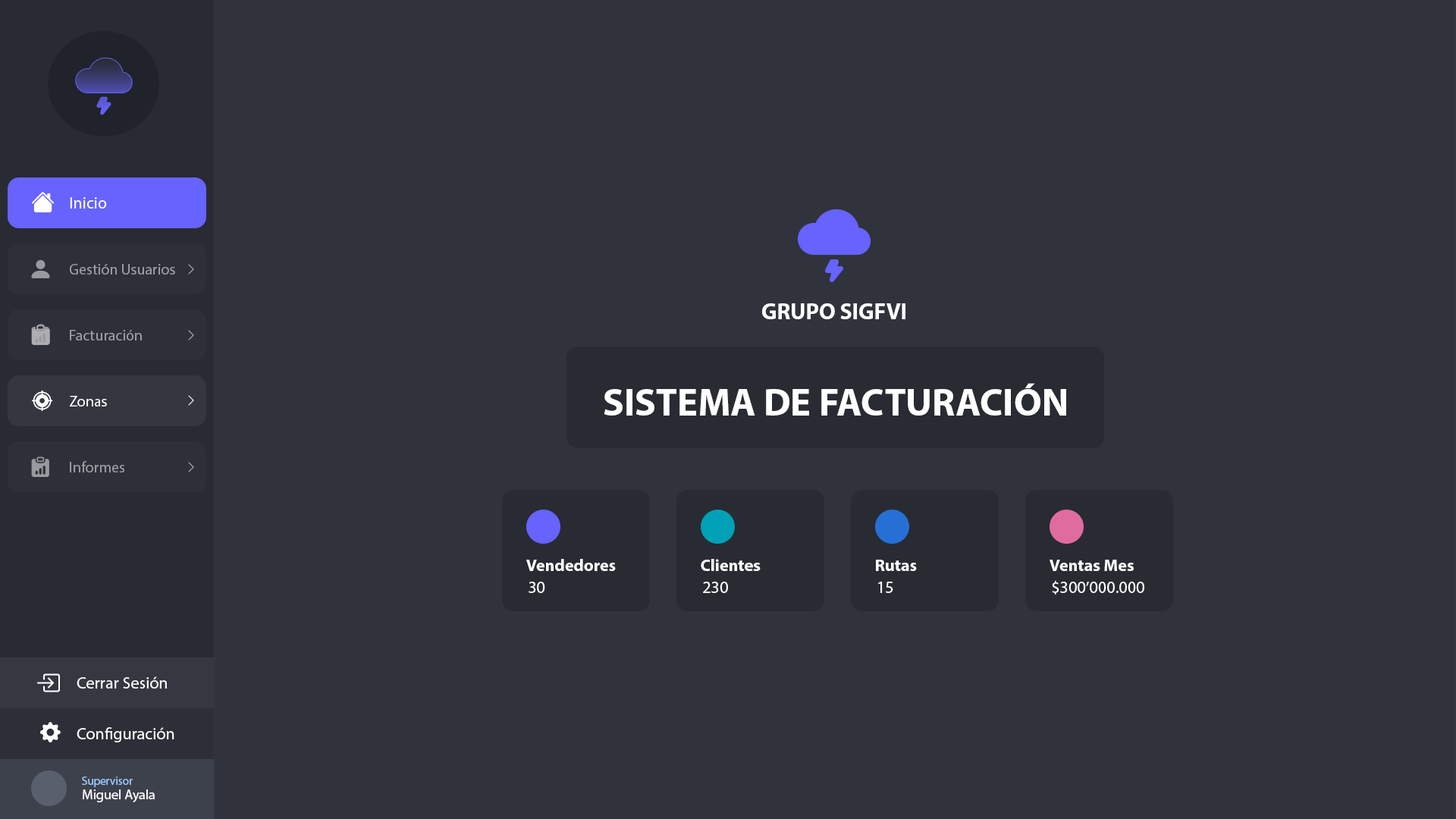
<style>
.page{position:relative;width:1456px;height:819px;background:#30333c}
.page>*{position:absolute;margin:0}
.t1{font:16.7px "MyriadPro-Regular";color:#ffffff}
.t2{font:15.2px "MyriadPro-Regular";color:#9e9fa3}
.t3{font:22.7px "MyriadPro-Bold";color:#ffffff}
.t4{font:38.7px "MyriadPro-Bold";color:#ffffff}
.t5{font:15.2px "MyriadPro-Regular";color:#ffffff}
.t6{font:16.9px "MyriadPro-Bold";color:#ffffff}
.t7{font:16.9px "MyriadPro-Regular";color:#ffffff}
.t8{font:11.4px "MyriadPro-Regular";color:#9dcdff}
.t9{font:13.6px "MyriadPro-Regular";color:#ffffff}
</style>
<div class="page">
<p class="t1" style="left:70px;top:197px;width:37px;height:12px">Inicio</p>
<p class="t2" style="left:70px;top:264px;width:105px;height:11px">Gestión Usuarios</p>
<p class="t3" style="left:762px;top:303px;width:143px;height:16px">GRUPO SIGFVI</p>
<p class="t2" style="left:70px;top:330px;width:72px;height:10px">Facturación</p>
<p class="t4" style="left:604px;top:383px;width:462px;height:33px">SISTEMA DE FACTURACIÓN</p>
<p class="t5" style="left:70px;top:396px;width:37px;height:10px">Zonas</p>
<p class="t2" style="left:70px;top:461px;width:54px;height:11px">Informes</p>
<p class="t6" style="left:526px;top:559px;width:90px;height:12px">Vendedores</p>
<p class="t6" style="left:701px;top:559px;width:60px;height:12px">Clientes</p>
<p class="t6" style="left:876px;top:560px;width:41px;height:11px">Rutas</p>
<p class="t6" style="left:1050px;top:560px;width:84px;height:11px">Ventas Mes</p>
<p class="t7" style="left:529px;top:582px;width:16px;height:11px">30</p>
<p class="t7" style="left:703px;top:582px;width:25px;height:11px">230</p>
<p class="t7" style="left:878px;top:582px;width:15px;height:11px">15</p>
<p class="t7" style="left:1052px;top:580px;width:92px;height:15px">$300’000.000</p>
<p class="t1" style="left:77px;top:676px;width:90px;height:13px">Cerrar Sesión</p>
<p class="t1" style="left:77px;top:727px;width:97px;height:15px">Configuración</p>
<p class="t8" style="left:82px;top:777px;width:51px;height:10px">Supervisor</p>
<p class="t9" style="left:83px;top:789px;width:72px;height:13px">Miguel Ayala</p>
</div>
